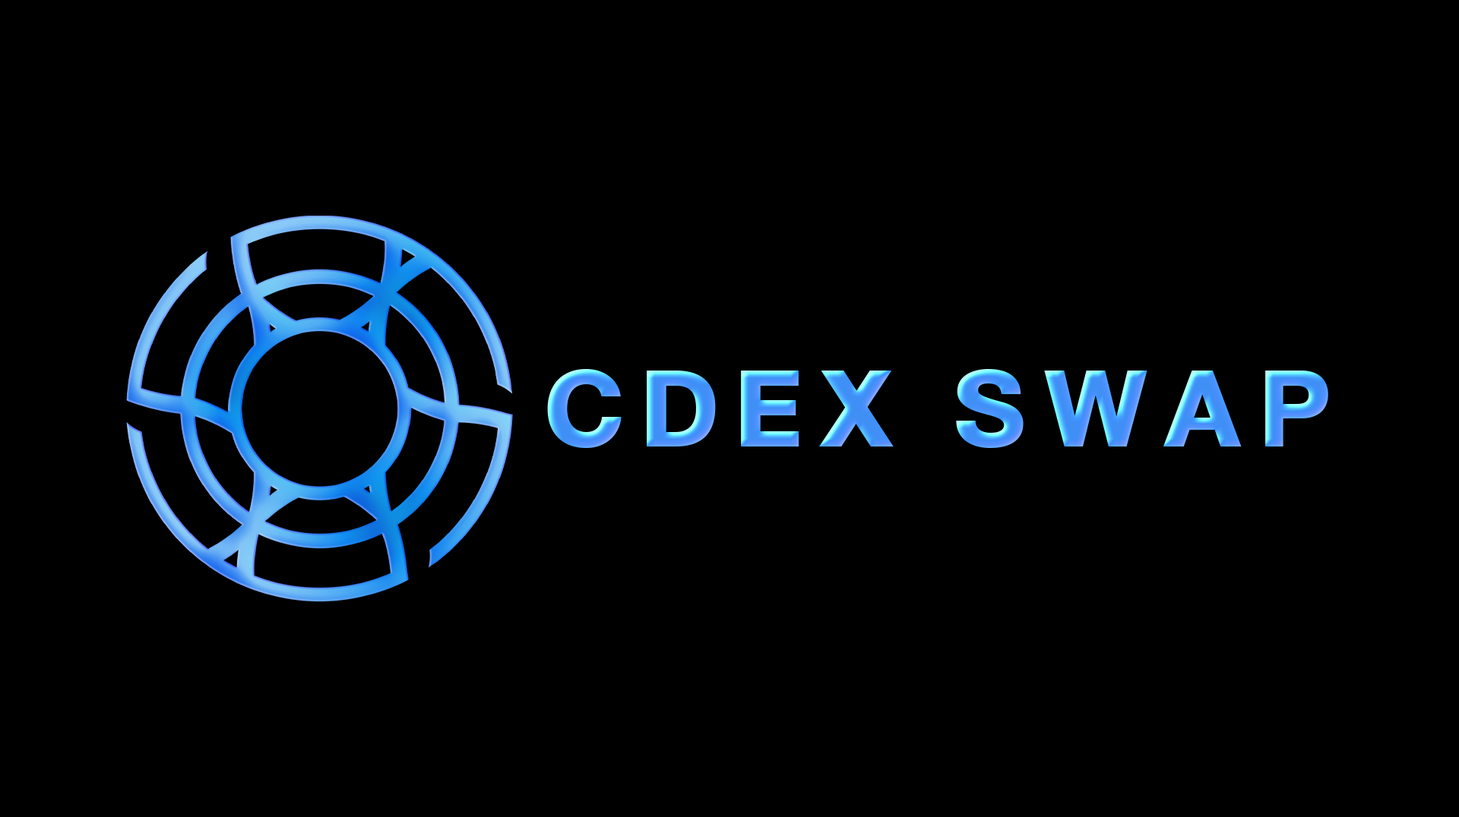
<style>
.page{position:relative;width:1459px;height:817px;background:#000000}
.page>*{position:absolute;margin:0}
.t1{font:155.2px "DBHelvethaicaX-Blk";letter-spacing:0.12em}
</style>
<div class="page">
<p class="t1" style="left:547px;top:369px;width:781px;height:79px">CDEX SWAP</p>
</div>
